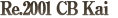
<style>
.page{position:relative;width:118px;height:18px;background:#ffffff}
.page>*{position:absolute;margin:0}
.t1{font:18px "RyuminPro-ExBold";letter-spacing:-0.08em;color:#4a3f32;font-weight:bold;scale:0.9 1}
</style>
<div class="page">
<p class="t1" style="left:0px;top:1px;width:109px;height:15px">Re.2001 CB Kai</p>
</div>
